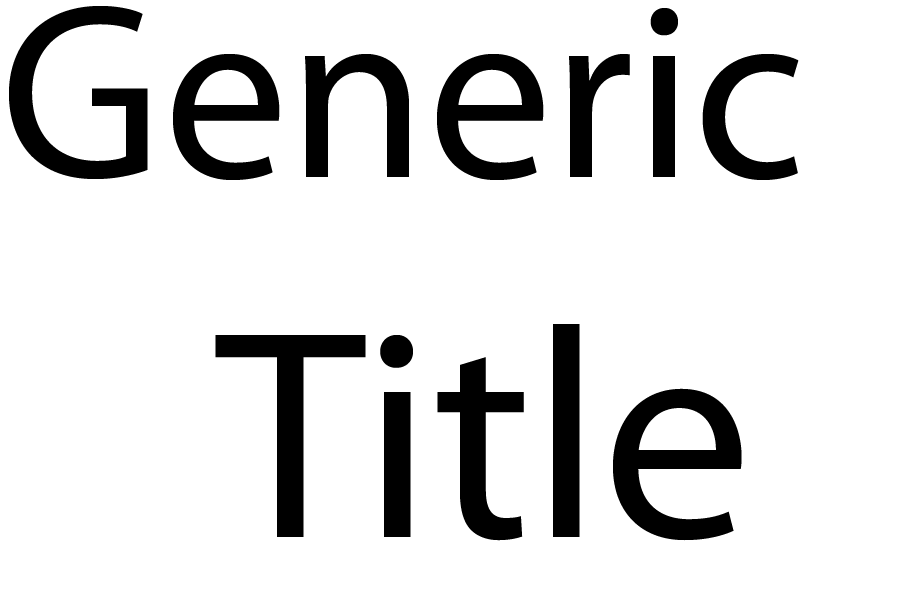
<style>
.page{position:relative;width:900px;height:600px;background:#ffffff}
.page>*{position:absolute;margin:0}
.t1{font:250px "MyriadPro-Regular";color:#000000}
.t2{font:300px "MyriadPro-Regular";color:#000000}
</style>
<div class="page">
<p class="t1" style="left:9px;top:6px;width:790px;height:535px">Generic<br><span class="t2">      Title</span></p>
</div>
